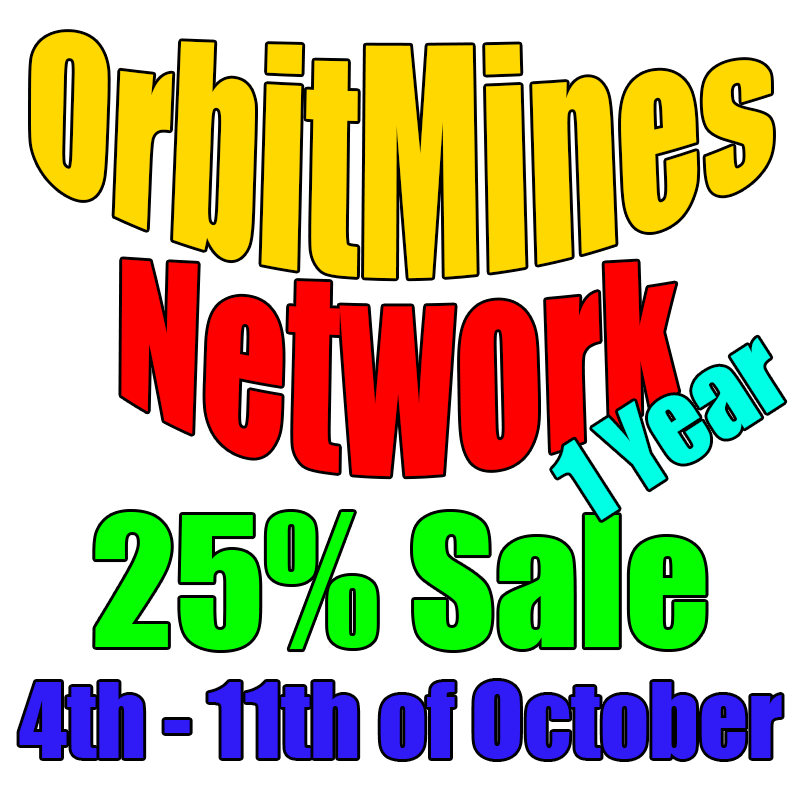
<style>
.page{position:relative;width:800px;height:800px;background:#ffffff}
.page>*{position:absolute;margin:0}
.t1{font:166.7px "Impact";color:#ffd800}
.t2{font:166.7px "Impact";color:#ff0000}
.t3{font:104.2px "Impact";color:#00ffe4}
.t4{font:95.8px "Impact";color:#301bf7}
</style>
<div class="page">
<p class="t1" style="left:31px;top:32px;width:742px;height:247px">OrbitMines</p>
<p class="t2" style="left:121px;top:259px;width:558px;height:218px">Network</p>
<p class="t3" style="left:552px;top:337px;width:233px;height:183px;rotate:-33deg">1 Year</p>
<p class="t4" style="left:19px;top:681px;width:763px;height:78px">4th - 11th of October</p>
</div>
